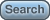
<style>
.page{position:relative;width:50px;height:20px}
.page>*{position:absolute;margin:0}
.t1{font:11.6px "FreeSansBold";color:#485560;scale:1.04 1}
</style>
<div class="page">
<p class="t1" style="left:5px;top:4px;width:39px;height:10px">Search</p>
</div>
